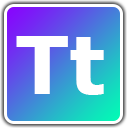
<style>
.page{position:relative;width:128px;height:128px;background:#ffffff}
.page>*{position:absolute;margin:0}
.t1{font:80px "Verdana-Bold";color:#ffffff}
</style>
<div class="page">
<p class="t1" style="left:16px;top:36px;width:88px;height:59px">Tt</p>
</div>
